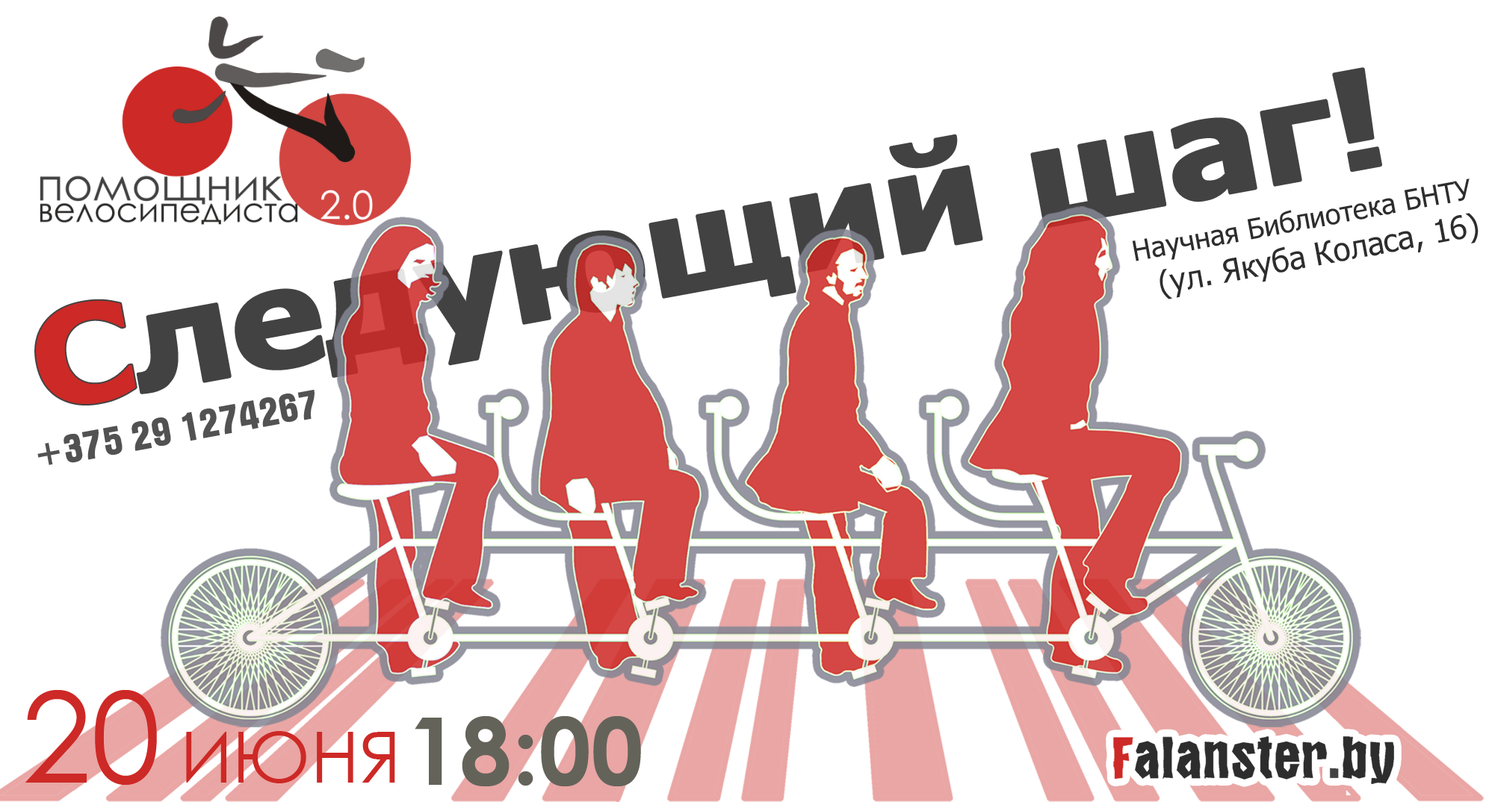
<style>
.page{position:relative;width:1486px;height:802px;background:#ffffff}
.page>*{position:absolute;margin:0}
.t1{font:134.4px "Tahoma-Bold";color:#434242;scale:1.14 1}
.t2{font:134.4px "Tahoma-Bold";color:#cd2926;scale:1.14 1}
.t3{font:28px "Tahoma";color:#2d2d2d}
.t4{font:31.4px "Tahoma";color:#2d2d2d}
.t5{font:40.8px "AAlterna";color:#525252}
.t6{font:71.1px "CenturyGothic";color:#cd2926}
.t7{font:125.4px "CenturyGothic";color:#cd2926}
.t8{font:93.7px "CenturyGothic-Bold";color:#64635a}
</style>
<div class="page">
<p class="t1" style="left:36px;top:69px;width:1345px;height:335px;rotate:-10deg"><span class="t2">С</span>ледующий шаг!</p>
<p class="t3" style="left:1132px;top:179px;width:347px;height:121px;rotate:-10deg">Научная Библиотека БНТУ<br><span class="t4">  (ул. Якуба Коласа, 16)</span></p>
<p class="t5" style="left:37px;top:389px;width:278px;height:76px;rotate:-10deg">+375 29 1274267</p>
<p class="t6" style="left:25px;top:690px;width:370px;height:95px"><span class="t7">20</span> ИЮНЯ</p>
<p class="t8" style="left:415px;top:716px;width:226px;height:71px">18:00</p>
</div>
